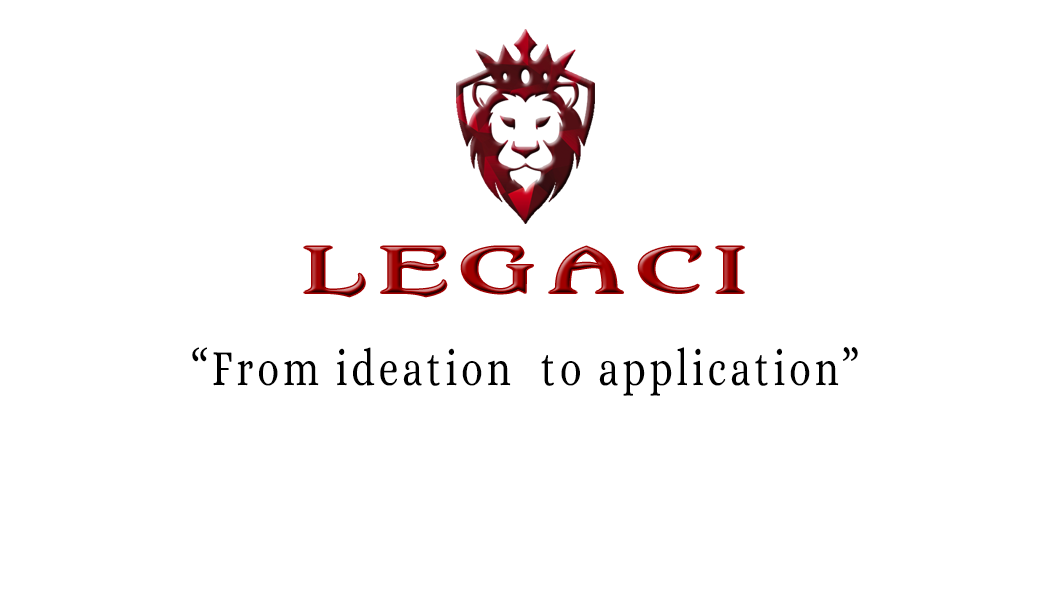
<style>
.page{position:relative;width:1050px;height:600px;background:#ffffff}
.page>*{position:absolute;margin:0}
.t1{font:64.6px "Maleficio";letter-spacing:0.1em;scale:2.36 1}
.t2{font:51.7px "Alice-Regular";letter-spacing:0.1em;color:#000000;scale:0.77 1}
</style>
<div class="page">
<p class="t1" style="left:304px;top:247px;width:440px;height:49px">Legaci</p>
<p class="t2" style="left:192px;top:347px;width:666px;height:49px">“From ideation  to application”</p>
</div>
